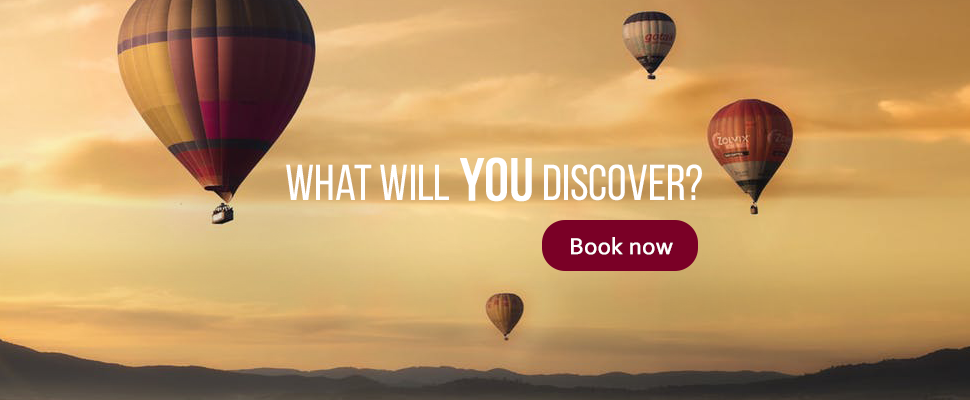
<style>
.page{position:relative;width:970px;height:400px}
.page>*{position:absolute;margin:0}
.t1{font:50px "BebasNeueRegular";color:#ffffff}
.t2{font:60px "BebasNeueRegular";color:#ffffff;font-weight:bold}
.t3{font:24px "Corbel";color:#ffffff;font-weight:bold}
</style>
<div class="page">
<p class="t1" style="left:286px;top:157px;width:416px;height:45px">What will <span class="t2">you </span>discover?</p>
<p class="t3" style="left:571px;top:237px;width:102px;height:18px">Book now</p>
</div>
